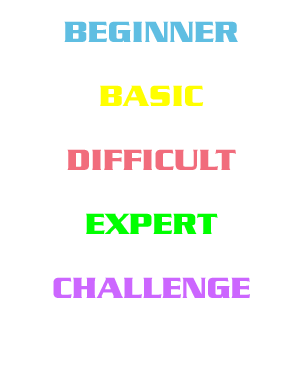
<style>
.page{position:relative;width:304px;height:384px;background:#ffffff}
.page>*{position:absolute;margin:0}
.t1{font:31.6px "Serpentine-Bold-Bold";color:#5fbee2}
.t2{font:31.6px "Serpentine-Bold-Bold";color:#ffff00}
.t3{font:31.6px "Serpentine-Bold-Bold";color:#f16c7c}
.t4{font:31.6px "Serpentine-Bold-Bold";color:#00ff00}
.t5{font:31.6px "Serpentine-Bold-Bold";color:#cc66ff}
</style>
<div class="page">
<p class="t1" style="left:64px;top:21px;width:174px;height:21px">BEGINNER</p>
<p class="t2" style="left:100px;top:85px;width:104px;height:21px">BASIC</p>
<p class="t3" style="left:67px;top:149px;width:169px;height:21px">DIFFICULT</p>
<p class="t4" style="left:86px;top:213px;width:132px;height:21px">EXPERT</p>
<p class="t5" style="left:53px;top:277px;width:197px;height:21px">CHALLENGE</p>
</div>
